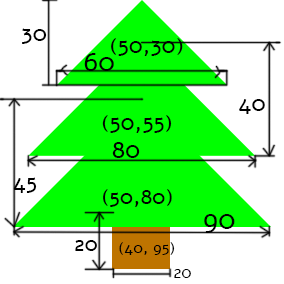
<style>
.page{position:relative;width:284px;height:284px;background:#ffffff}
.page>*{position:absolute;margin:0}
.t1{font:24.3px "Alef-Regular";color:#000000}
.t2{font:23.1px "Alef-Regular";color:#000000}
.t3{font:28.2px "Alef-Regular";color:#000000}
.t4{font:23.7px "Alef-Regular";color:#000000}
.t5{font:24.7px "Alef-Regular";color:#000000}
.t6{font:23.4px "Alef-Regular";color:#000000}
.t7{font:22px "Alef-Regular";color:#000000}
.t8{font:28.8px "Alef-Regular";color:#000000}
.t9{font:22.2px "Alef-Regular";color:#000000}
.t10{font:16.3px "Alef-Regular";color:#000000}
.t11{font:16.9px "Alef-Regular";color:#000000}
</style>
<div class="page">
<p class="t1" style="left:22px;top:28px;width:25px;height:16px">30</p>
<p class="t2" style="left:111px;top:38px;width:72px;height:18px">(50,30)</p>
<p class="t3" style="left:84px;top:53px;width:30px;height:18px">60</p>
<p class="t4" style="left:239px;top:99px;width:26px;height:15px">40</p>
<p class="t2" style="left:102px;top:115px;width:70px;height:18px">(50,55)</p>
<p class="t5" style="left:112px;top:142px;width:28px;height:16px">80</p>
<p class="t6" style="left:13px;top:177px;width:24px;height:16px">45</p>
<p class="t7" style="left:103px;top:189px;width:69px;height:18px">(50,80)</p>
<p class="t8" style="left:204px;top:214px;width:31px;height:19px">90</p>
<p class="t9" style="left:75px;top:240px;width:22px;height:11px">20</p>
<p class="t10" style="left:119px;top:242px;width:56px;height:13px">(40, 95)</p>
<p class="t11" style="left:174px;top:269px;width:17px;height:9px">20</p>
</div>
